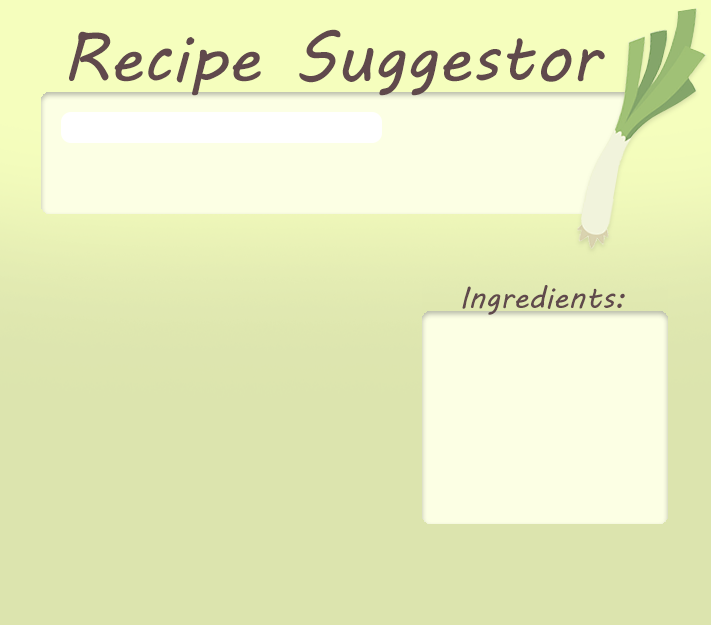
<style>
.page{position:relative;width:711px;height:625px;background:#dce4ae}
.page>*{position:absolute;margin:0}
.t1{font:66px "MVBoli";color:#60494c;scale:1.03 1}
.t2{font:30px "MVBoli";color:#60494c;scale:1.03 1}
</style>
<div class="page">
<p class="t1" style="left:69px;top:29px;width:536px;height:67px">Recipe Suggestor</p>
<p class="t2" style="left:462px;top:285px;width:163px;height:30px">Ingredients:</p>
</div>
